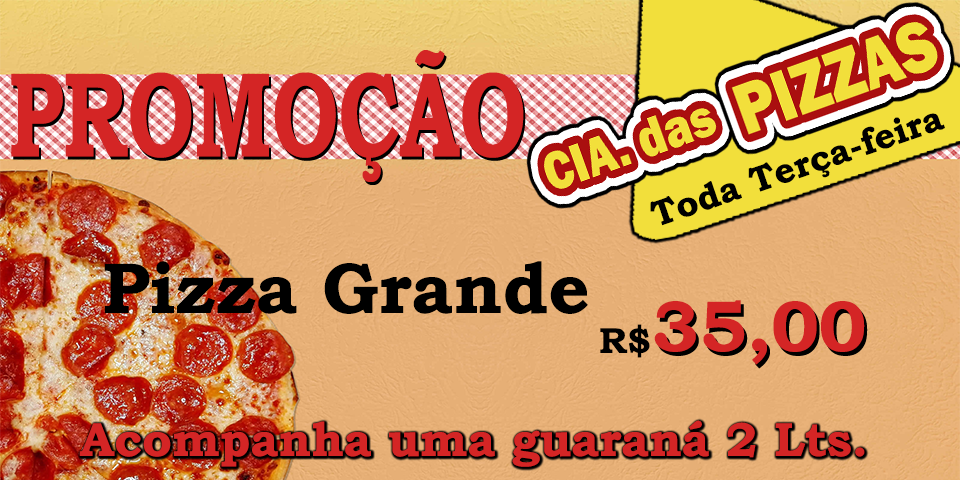
<style>
.page{position:relative;width:960px;height:480px}
.page>*{position:absolute;margin:0}
.t1{font:120.9px "BookmanOldStyle-Bold";color:#d42525;scale:0.69 1}
.t2{font:36px "BookmanOldStyle-Bold";color:#000000}
.t3{font:72px "BookmanOldStyle-Bold";color:#000000}
.t4{font:72px "BookmanOldStyle-Bold";color:#d42525}
.t5{font:48px "BookmanOldStyle-Bold";color:#d42525}
</style>
<div class="page">
<p class="t1" style="left:11px;top:50px;width:513px;height:132px">PROMOÇÃO</p>
<p class="t2" style="left:650px;top:113px;width:295px;height:113px;rotate:-19deg">Toda Terça-feira</p>
<p class="t3" style="left:104px;top:261px;width:484px;height:53px">Pizza Grande</p>
<p class="t4" style="left:654px;top:300px;width:211px;height:65px">35,00</p>
<p class="t2" style="left:600px;top:324px;width:50px;height:34px">R$</p>
<p class="t5" style="left:79px;top:420px;width:786px;height:47px">Acompanha uma guaraná 2 Lts.</p>
</div>
